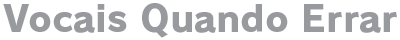
<style>
.page{position:relative;width:400px;height:40px;background:#ffffff}
.page>*{position:absolute;margin:0}
.t1{font:36px "RodinPro-EB";letter-spacing:0.003em;color:#989a9d}
</style>
<div class="page">
<p class="t1" style="left:3px;top:3px;width:394px;height:35px">Vocais Quando Errar</p>
</div>
